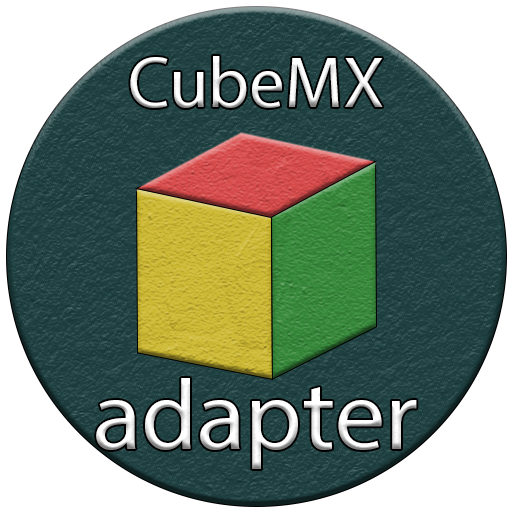
<style>
.page{position:relative;width:512px;height:512px;background:#ffffff}
.page>*{position:absolute;margin:0}
.t1{font:72px "MyriadPro-Regular";color:#f7f7f7}
.t2{font:100px "MyriadPro-Regular"}
</style>
<div class="page">
<p class="t1" style="left:130px;top:56px;width:253px;height:52px">CubeMX</p>
<p class="t2" style="left:96px;top:378px;width:321px;height:91px">adapter</p>
</div>
